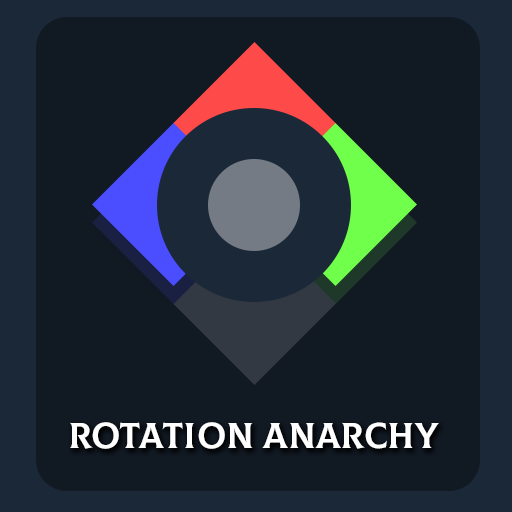
<style>
.page{position:relative;width:512px;height:512px;background:#111923}
.page>*{position:absolute;margin:0}
.t1{font:36px "Colus-Regular";color:#ffffff;text-transform:uppercase}
</style>
<div class="page">
<p class="t1" style="left:70px;top:422px;width:369px;height:27px">Rotation anarchy</p>
</div>
